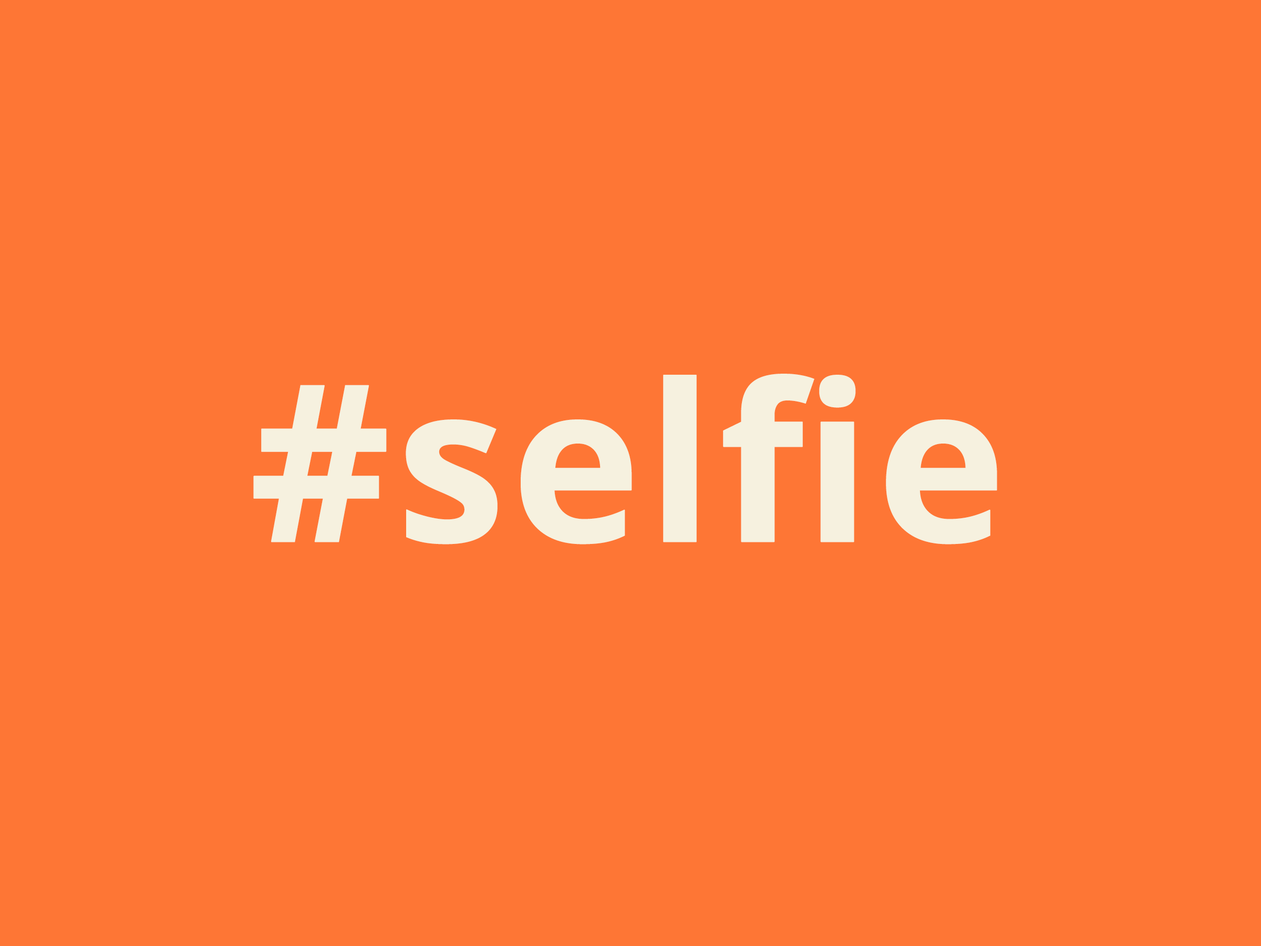
<style>
.page{position:relative;width:1261px;height:946px;background:#fe7635}
.page>*{position:absolute;margin:0}
.t1{font:218.9px "OpenSans-Bold";color:#f6f1df;font-weight:bold}
</style>
<div class="page">
<p class="t1" style="left:253px;top:374px;width:744px;height:170px">#selfie</p>
</div>
